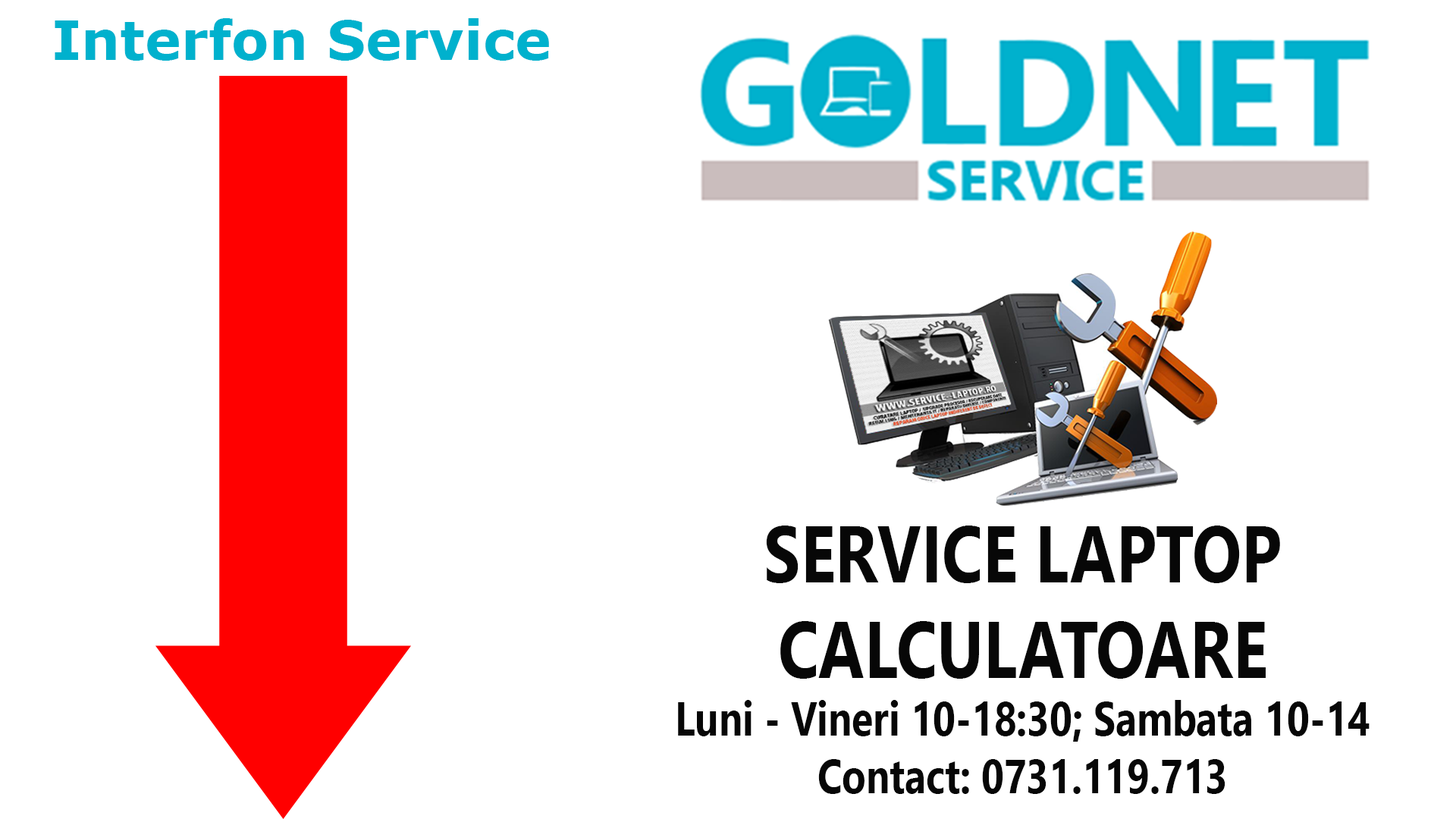
<style>
.page{position:relative;width:1456px;height:819px;background:#ffffff}
.page>*{position:absolute;margin:0}
.t1{font:54.6px "Verdana-Bold";color:#00b1cd}
.t2{font:48px "SegoeUI-Bold";color:#070707;scale:0.82 1}
.t3{font:80px "SegoeUI-Bold";color:#070707;scale:0.82 1}
</style>
<div class="page">
<p class="t1" style="left:55px;top:18px;width:494px;height:43px">Interfon Service</p>
<p class="t2" style="left:678px;top:526px;width:692px;height:268px;text-align:center"><span class="t3">SERVICE LAPTOP<br>CALCULATOARE<br></span>Luni - Vineri 10-18:30; Sambata 10-14 <br>Contact: 0731.119.713<br>BL P4, SC.4 Parter</p>
</div>
